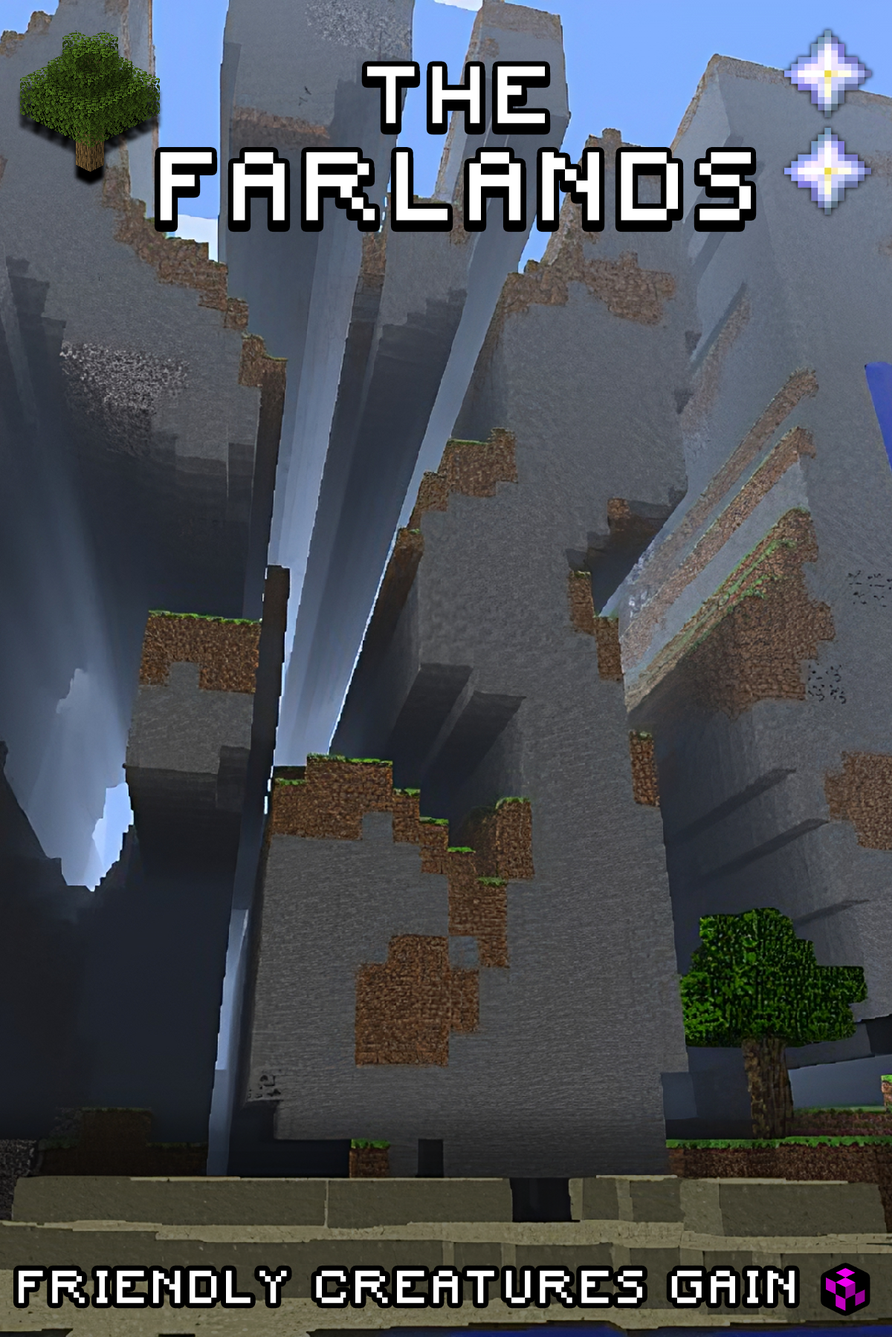
<style>
.page{position:relative;width:892px;height:1337px}
.page>*{position:absolute;margin:0}
.t1{font:155.5px/88.4px "Minecraft";letter-spacing:0.18em;color:#ffffff}
.t2{font:128.9px/88.4px "Minecraft";letter-spacing:0.18em;color:#ffffff}
.t3{font:73.6px "Minecraft";letter-spacing:0.16em;color:#ffffff}
.t4{font:73.6px "stoogedings-Regular";letter-spacing:0.16em;color:#ffffff}
</style>
<div class="page">
<p class="t1" style="left:160px;top:66px;width:590px;height:155px;text-align:center"><span class="t2">THE<br></span>FARLANDS</p>
<p class="t3" style="left:19px;top:1268px;width:846px;height:43px">FRIENDLY CREATURES GAIN <span class="t4">[unknown]</span></p>
</div>
